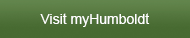
<style>
.page{position:relative;width:190px;height:38px}
.page>*{position:absolute;margin:0}
.t1{font:14px "ArialMT";color:#ffffff}
</style>
<div class="page">
<p class="t1" style="left:40px;top:13px;width:110px;height:14px">Visit myHumboldt</p>
</div>
